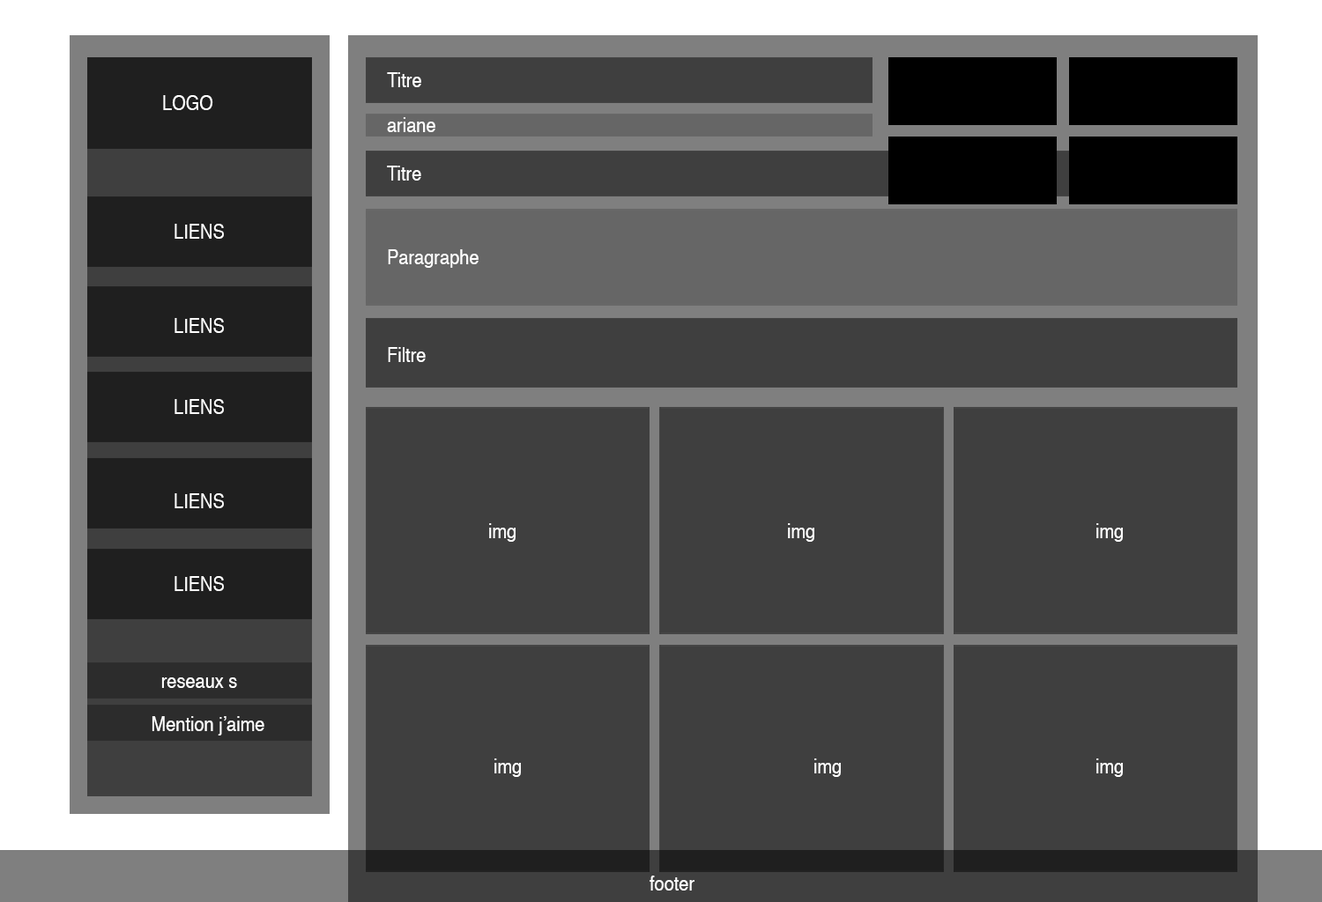
<style>
.page{position:relative;width:1322px;height:902px;background:#3f3f3f}
.page>*{position:absolute;margin:0}
.t1{font:19.4px "Helvetica";color:#ffffff;scale:0.91 1}
</style>
<div class="page">
<p class="t1" style="left:387px;top:72px;width:34px;height:15px">Titre</p>
<p class="t1" style="left:163px;top:95px;width:50px;height:15px">LOGO</p>
<p class="t1" style="left:387px;top:117px;width:48px;height:15px">ariane</p>
<p class="t1" style="left:387px;top:166px;width:34px;height:15px">Titre</p>
<p class="t1" style="left:174px;top:224px;width:50px;height:15px">LIENS</p>
<p class="t1" style="left:388px;top:249px;width:90px;height:19px">Paragraphe</p>
<p class="t1" style="left:174px;top:318px;width:50px;height:15px">LIENS</p>
<p class="t1" style="left:388px;top:347px;width:38px;height:15px">Filtre</p>
<p class="t1" style="left:174px;top:399px;width:50px;height:15px">LIENS</p>
<p class="t1" style="left:174px;top:493px;width:50px;height:15px">LIENS</p>
<p class="t1" style="left:489px;top:523px;width:26px;height:19px">img</p>
<p class="t1" style="left:788px;top:523px;width:26px;height:19px">img</p>
<p class="t1" style="left:1096px;top:523px;width:27px;height:19px">img</p>
<p class="t1" style="left:174px;top:576px;width:50px;height:15px">LIENS</p>
<p class="t1" style="left:161px;top:678px;width:76px;height:10px">reseaux s</p>
<p class="t1" style="left:152px;top:716px;width:112px;height:20px">Mention j’aime</p>
<p class="t1" style="left:494px;top:759px;width:27px;height:18px">img</p>
<p class="t1" style="left:814px;top:759px;width:27px;height:18px">img</p>
<p class="t1" style="left:1096px;top:759px;width:27px;height:18px">img</p>
<p class="t1" style="left:649px;top:876px;width:45px;height:15px">footer</p>
</div>
